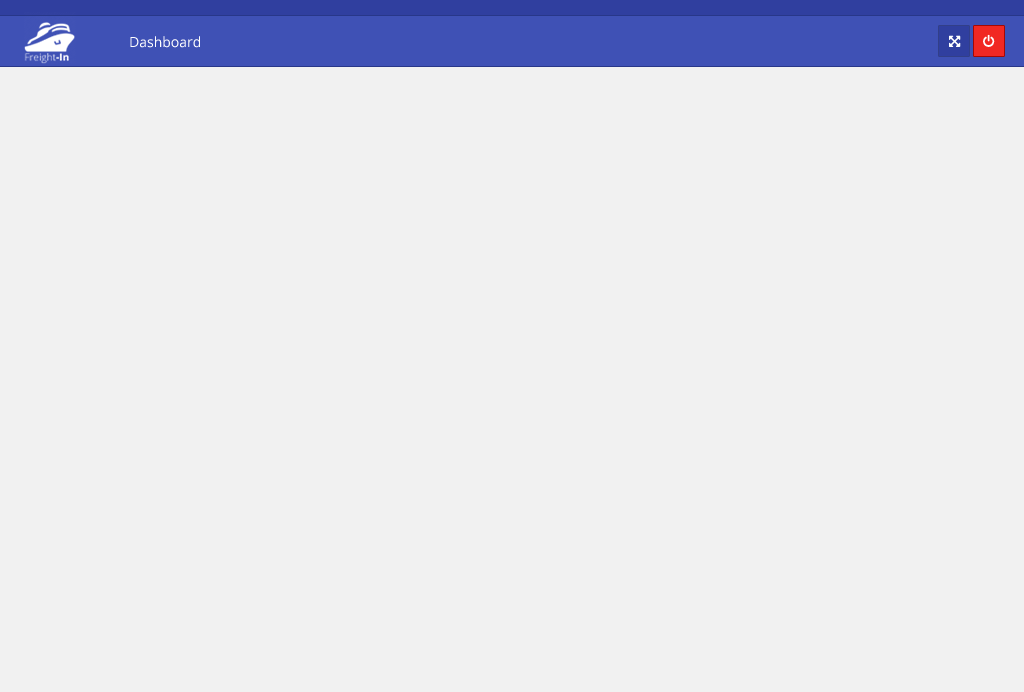
<style>
.page{position:relative;width:1024px;height:692px;background:#f1f1f1}
.page>*{position:absolute;margin:0}
.t1{font:14px "OpenSans";color:#ffffff}
</style>
<div class="page">
<p class="t1" style="left:130px;top:36px;width:70px;height:12px">Dashboard</p>
</div>
